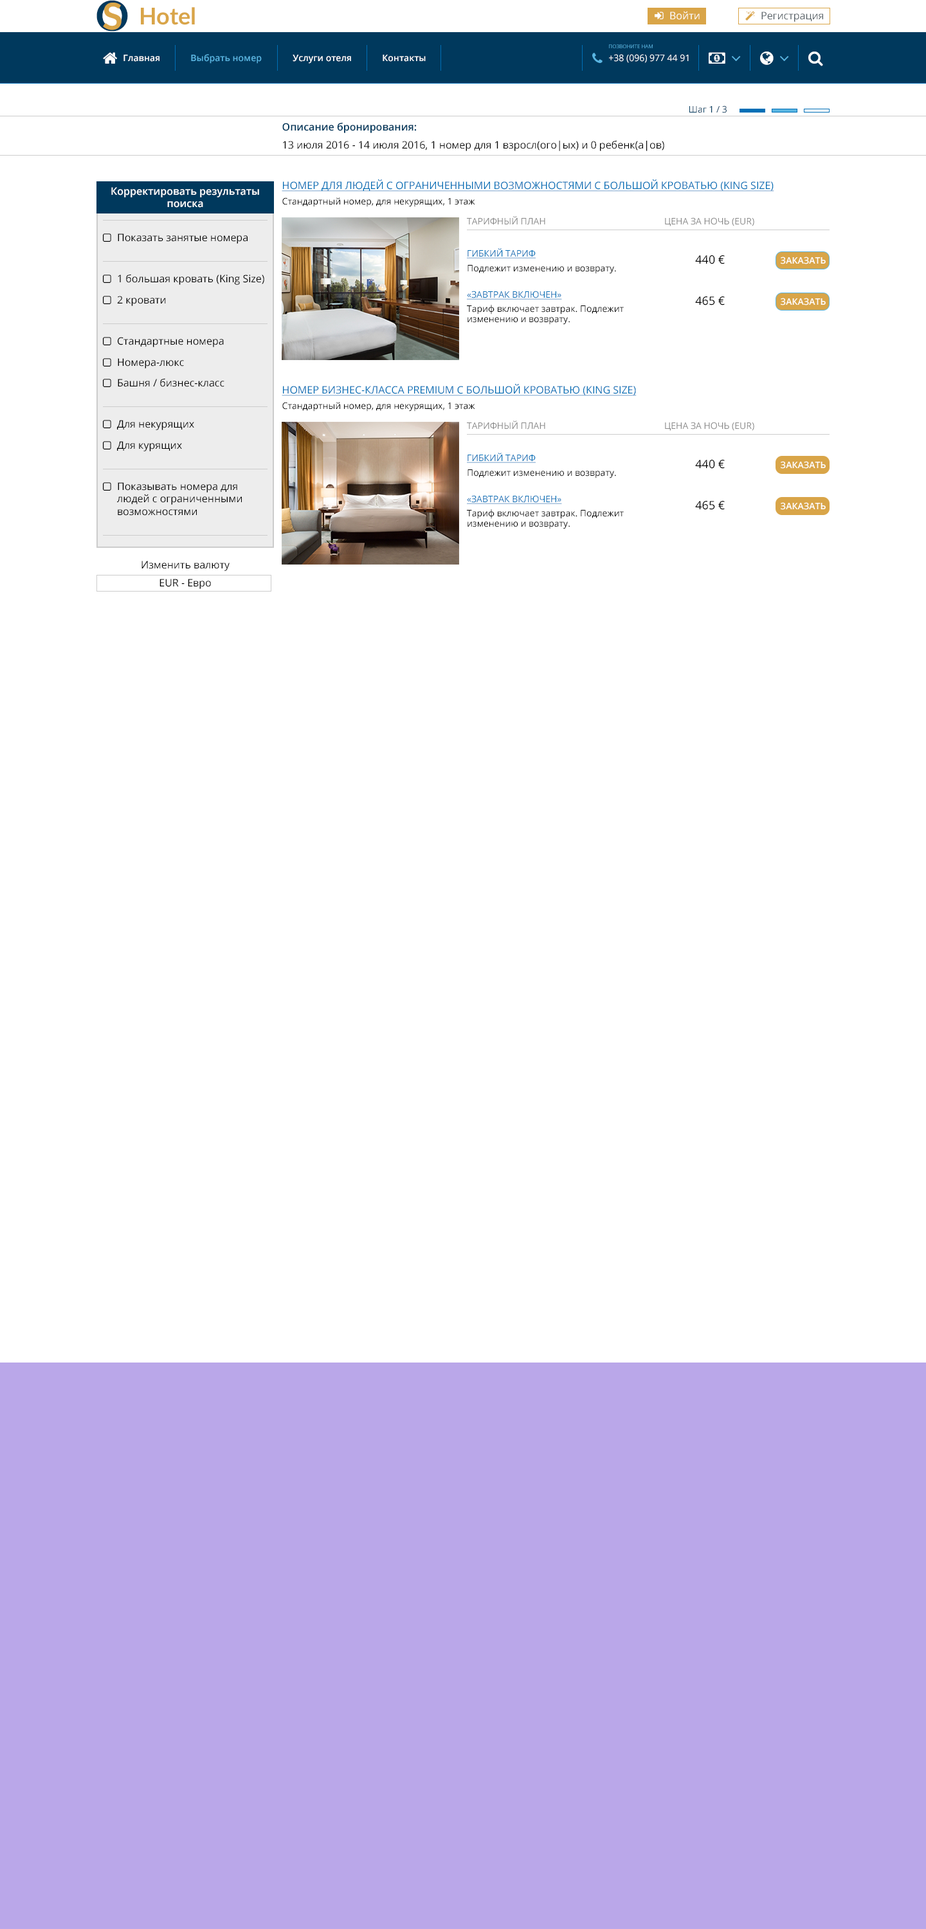
<style>
.page{position:relative;width:926px;height:1929px;background:#ffffff}
.page>*{position:absolute;margin:0}
.t1{font:41.6px "Lato-Bold";color:#00395d}
.t2{font:36.9px "Lato-Bold";color:#d9a548}
.t3{font:23.1px "Lato-Bold";color:#d9a548}
.t4{font:10.3px "OpenSans";color:#ffffff}
.t5{font:10.3px "OpenSans";color:#565f65}
.t6{font:5.1px "OpenSans";color:#59b5e2;text-transform:uppercase}
.t7{font:9px "OpenSans-Semibold";color:#ffffff}
.t8{font:9px "OpenSans-Semibold";color:#59b5e2}
.t9{font:9px "OpenSans";color:#ffffff}
.t10{font:9px "OpenSans";color:#00395d}
.t11{font:10.3px/18px "OpenSans";color:#000000}
.t12{font:10.3px "OpenSans-Semibold";color:#00395d}
.t13{font:10.3px "OpenSans";color:#006fb6;text-decoration:underline}
.t14{font:10.3px "OpenSans-Semibold";color:#ffffff}
.t15{font:9px "OpenSans";color:#000000}
.t16{font:9px "OpenSans";color:#888888}
.t17{font:10.3px "OpenSans";color:#000000}
.t18{font:9px "OpenSans";color:#006fb6;text-decoration:underline}
.t19{font:11.6px "OpenSans";color:#000000}
</style>
<div class="page">
<p class="t1" style="left:96px;top:0px;width:32px;height:32px">O</p>
<p class="t2" style="left:103px;top:3px;width:19px;height:27px">S</p>
<p class="t3" style="left:141px;top:7px;width:54px;height:18px">Hotel</p>
<p class="t4" style="left:670px;top:11px;width:29px;height:9px">Войти</p>
<p class="t5" style="left:761px;top:12px;width:62px;height:10px">Регистрация</p>
<p class="t6" style="left:609px;top:44px;width:43px;height:4px">Позвоните нам</p>
<p class="t7" style="left:123px;top:55px;width:36px;height:7px">Главная</p>
<p class="t8" style="left:191px;top:54px;width:71px;height:10px">Выбрать номер</p>
<p class="t7" style="left:292px;top:55px;width:59px;height:9px">Услуги отеля</p>
<p class="t7" style="left:382px;top:55px;width:44px;height:7px">Контакты</p>
<p class="t9" style="left:609px;top:54px;width:79px;height:9px">+38 (096) 977 44 91</p>
<p class="t10" style="left:689px;top:105px;width:37px;height:8px">Шаг 1 / 3</p>
<p class="t11" style="left:282px;top:122px;width:382px;height:29px"><span class="t12">Описание бронирования:<br></span>13 июля 2016 - 14 июля 2016, 1 номер для 1 взросл(ого|ых) и 0 ребенк(а|ов)</p>
<p class="t13" style="left:282px;top:179px;width:492px;height:13px">НОМЕР ДЛЯ ЛЮДЕЙ С ОГРАНИЧЕННЫМИ ВОЗМОЖНОСТЯМИ С БОЛЬШОЙ КРОВАТЬЮ (KING SIZE)</p>
<p class="t14" style="left:111px;top:187px;width:148px;height:21px;text-align:center">Корректировать результаты поиска</p>
<p class="t15" style="left:282px;top:197px;width:193px;height:10px">Стандартный номер, для некурящих, 1 этаж</p>
<p class="t16" style="left:467px;top:216px;width:78px;height:9px">ТАРИФНЫЙ ПЛАН</p>
<p class="t16" style="left:665px;top:217px;width:89px;height:9px">ЦЕНА ЗА НОЧЬ (EUR)</p>
<p class="t17" style="left:118px;top:233px;width:130px;height:11px">Показать занятые номера</p>
<p class="t18" style="left:467px;top:248px;width:69px;height:10px">ГИБКИЙ ТАРИФ</p>
<p class="t19" style="left:695px;top:255px;width:29px;height:9px">440 €</p>
<p class="t7" style="left:780px;top:256px;width:45px;height:8px">ЗАКАЗАТЬ</p>
<p class="t15" style="left:467px;top:265px;width:149px;height:9px">Подлежит изменению и возврату.</p>
<p class="t17" style="left:118px;top:274px;width:146px;height:11px">1 большая кровать (King Size)</p>
<p class="t18" style="left:467px;top:291px;width:95px;height:9px">«ЗАВТРАК ВКЛЮЧЕН»</p>
<p class="t17" style="left:117px;top:296px;width:49px;height:10px">2 кровати</p>
<p class="t15" style="left:467px;top:305px;width:157px;height:20px">Тариф включает завтрак. Подлежит изменению и возврату.</p>
<p class="t19" style="left:695px;top:296px;width:29px;height:9px">465 €</p>
<p class="t7" style="left:780px;top:298px;width:45px;height:7px">ЗАКАЗАТЬ</p>
<p class="t17" style="left:118px;top:337px;width:106px;height:10px">Стандартные номера</p>
<p class="t17" style="left:118px;top:358px;width:66px;height:10px">Номера-люкс</p>
<p class="t17" style="left:118px;top:378px;width:106px;height:9px">Башня / бизнес-класс</p>
<p class="t13" style="left:282px;top:384px;width:354px;height:12px">НОМЕР БИЗНЕС-КЛАССА PREMIUM С БОЛЬШОЙ КРОВАТЬЮ (KING SIZE)</p>
<p class="t15" style="left:282px;top:402px;width:193px;height:9px">Стандартный номер, для некурящих, 1 этаж</p>
<p class="t17" style="left:117px;top:420px;width:77px;height:10px">Для некурящих</p>
<p class="t16" style="left:467px;top:420px;width:78px;height:9px">ТАРИФНЫЙ ПЛАН</p>
<p class="t16" style="left:665px;top:422px;width:89px;height:9px">ЦЕНА ЗА НОЧЬ (EUR)</p>
<p class="t17" style="left:117px;top:441px;width:65px;height:10px">Для курящих</p>
<p class="t18" style="left:467px;top:453px;width:69px;height:10px">ГИБКИЙ ТАРИФ</p>
<p class="t19" style="left:695px;top:460px;width:29px;height:9px">440 €</p>
<p class="t7" style="left:780px;top:461px;width:45px;height:8px">ЗАКАЗАТЬ</p>
<p class="t15" style="left:467px;top:469px;width:149px;height:9px">Подлежит изменению и возврату.</p>
<p class="t17" style="left:117px;top:482px;width:125px;height:34px">Показывать номера для людей с ограниченными возможностями</p>
<p class="t18" style="left:467px;top:495px;width:95px;height:9px">«ЗАВТРАК ВКЛЮЧЕН»</p>
<p class="t15" style="left:467px;top:509px;width:157px;height:20px">Тариф включает завтрак. Подлежит изменению и возврату.</p>
<p class="t19" style="left:695px;top:501px;width:29px;height:9px">465 €</p>
<p class="t7" style="left:780px;top:502px;width:45px;height:8px">ЗАКАЗАТЬ</p>
<p class="t17" style="left:141px;top:561px;width:89px;height:10px">Изменить валюту</p>
<p class="t17" style="left:159px;top:579px;width:52px;height:10px">EUR - Евро</p>
</div>
